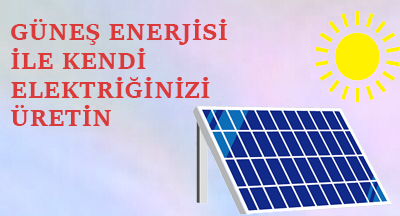
<style>
.page{position:relative;width:400px;height:216px}
.page>*{position:absolute;margin:0}
.t1{font:24px "SitkaSmall-Bold";color:#db3a3a}
</style>
<div class="page">
<p class="t1" style="left:10px;top:19px;width:217px;height:107px">GÜNEŞ ENERJİSİ<br>İLE KENDİ<br>ELEKTRİĞİNİZİ<br>ÜRETİN</p>
</div>
